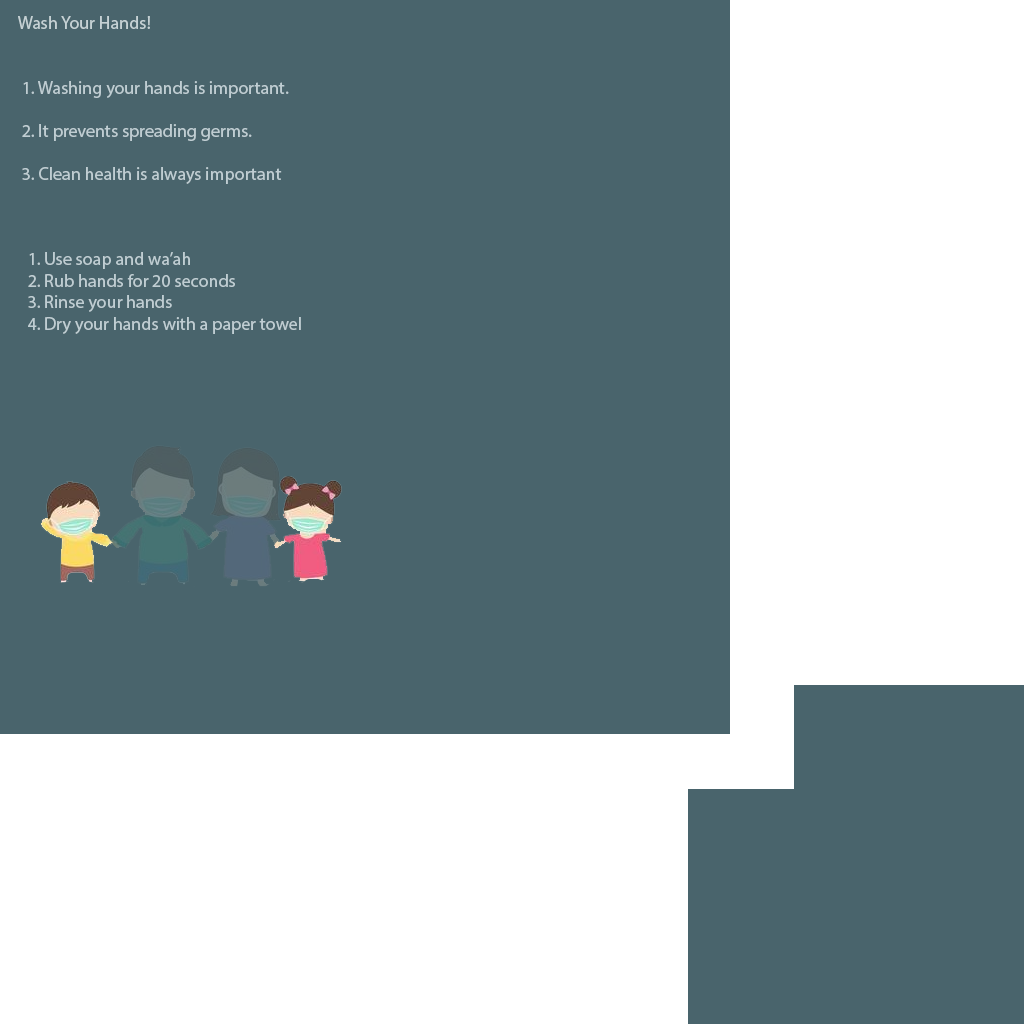
<style>
.page{position:relative;width:1024px;height:1024px;background:#49646c}
.page>*{position:absolute;margin:0}
.t1{font:18px "MyriadPro-Regular";color:#c5d1d4}
.t2{font:18px "MyriadPro-Regular";color:#bfcdd2}
</style>
<div class="page">
<p class="t1" style="left:18px;top:16px;width:132px;height:13px">Wash Your Hands!</p>
<p class="t2" style="left:22px;top:81px;width:267px;height:103px">1. Washing your hands is important.<br><br>2. It prevents spreading germs.<br><br>3. Clean health is always important</p>
<p class="t2" style="left:28px;top:252px;width:273px;height:82px">1. Use soap and wa’ah<br>2. Rub hands for 20 seconds<br>3. Rinse your hands<br>4. Dry your hands with a paper towel</p>
</div>
